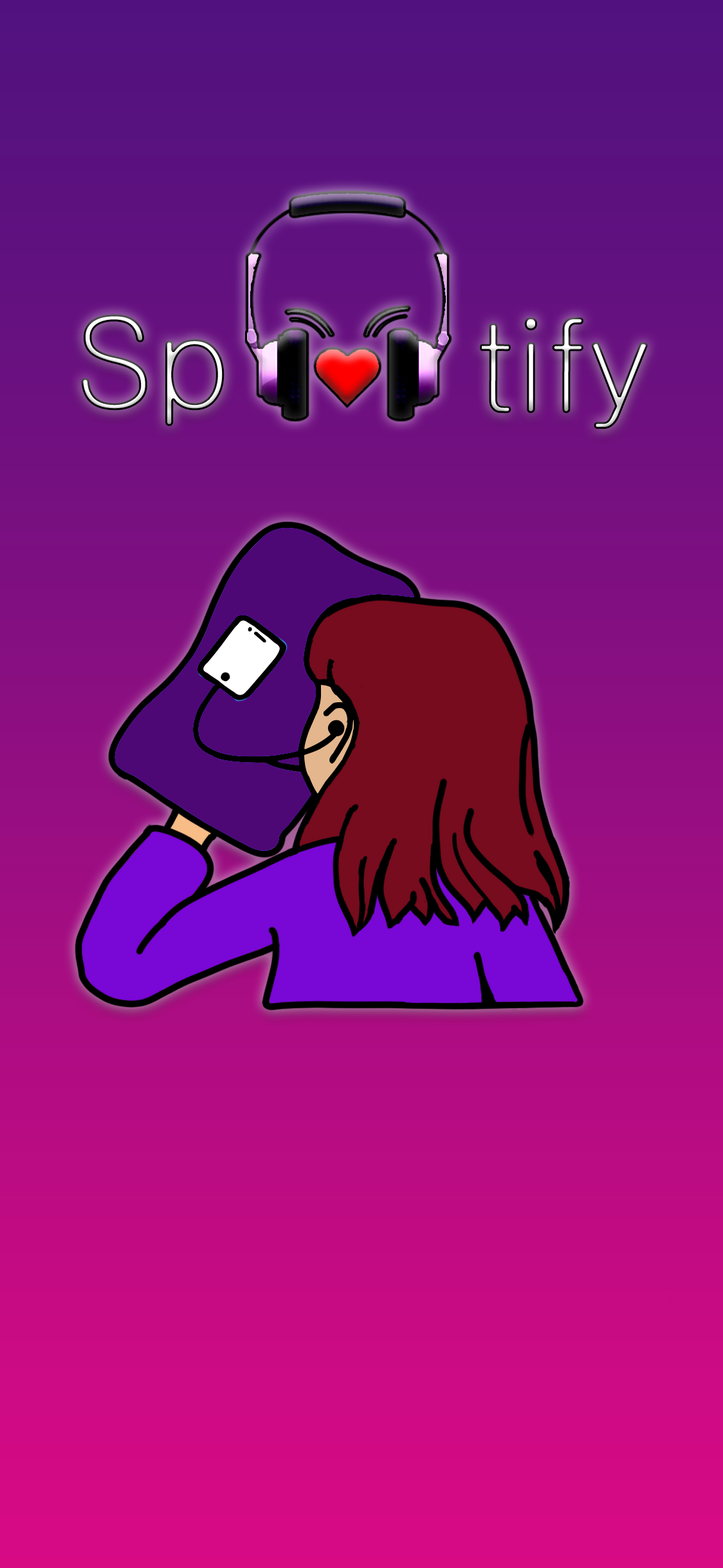
<style>
.page{position:relative;width:723px;height:1568px}
.page>*{position:absolute;margin:0}
.t1{font:127px "Gulim"}
</style>
<div class="page">
<p class="t1" style="left:81px;top:314px;width:144px;height:112px">Sp</p>
<p class="t1" style="left:480px;top:317px;width:168px;height:112px">tify</p>
</div>
